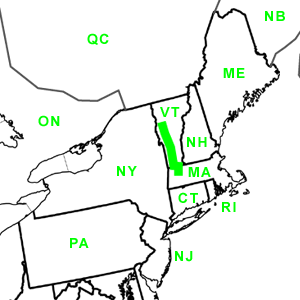
<style>
.page{position:relative;width:300px;height:300px;background:#ffffff}
.page>*{position:absolute;margin:0}
.t1{font:13.1px "Arial-BoldMT";letter-spacing:0.1em;color:#00ff00}
.t2{font:14px "Arial-BoldMT";letter-spacing:0.1em;color:#00ff00}
</style>
<div class="page">
<p class="t1" style="left:265px;top:11px;width:20px;height:10px">NB</p>
<p class="t1" style="left:87px;top:33px;width:22px;height:12px">QC</p>
<p class="t1" style="left:223px;top:68px;width:22px;height:10px">ME</p>
<p class="t1" style="left:160px;top:107px;width:20px;height:10px">VT</p>
<p class="t1" style="left:38px;top:115px;width:22px;height:12px">ON</p>
<p class="t1" style="left:187px;top:137px;width:20px;height:10px">NH</p>
<p class="t2" style="left:117px;top:166px;width:20px;height:10px">NY</p>
<p class="t1" style="left:188px;top:167px;width:23px;height:10px">MA</p>
<p class="t1" style="left:178px;top:192px;width:20px;height:11px">CT</p>
<p class="t1" style="left:222px;top:202px;width:14px;height:10px">RI</p>
<p class="t1" style="left:70px;top:238px;width:19px;height:10px">PA</p>
<p class="t1" style="left:175px;top:251px;width:18px;height:11px">NJ</p>
</div>
